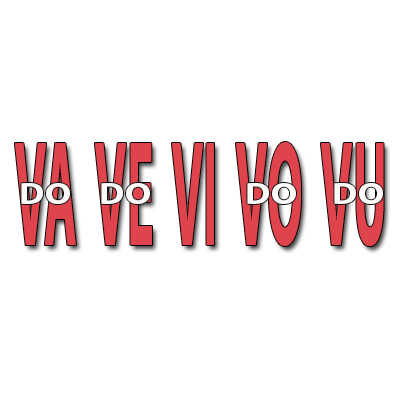
<style>
.page{position:relative;width:400px;height:400px;background:#ffffff}
.page>*{position:absolute;margin:0}
.t1{font:151.8px "MyriadPro-Bold";color:#df444c;scale:0.33 1}
.t2{font:30.4px "MyriadPro-Bold";color:#fefafa;scale:1.21 1}
</style>
<div class="page">
<p class="t1" style="left:15px;top:142px;width:369px;height:104px">VA  VE  VI  VO  VU</p>
<p class="t2" style="left:21px;top:183px;width:49px;height:21px">DO</p>
<p class="t2" style="left:101px;top:183px;width:49px;height:21px">DO</p>
<p class="t2" style="left:247px;top:183px;width:49px;height:21px">DO</p>
<p class="t2" style="left:334px;top:183px;width:49px;height:21px">DO</p>
</div>
